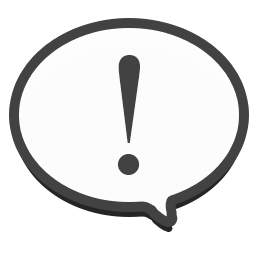
<style>
.page{position:relative;width:256px;height:256px;background:#ffffff}
.page>*{position:absolute;margin:0}
.t1{font:179.4px "BaskOldFace";letter-spacing:-0.02em;color:#424242}
</style>
<div class="page">
<p class="t1" style="left:117px;top:55px;width:23px;height:120px">!</p>
</div>
